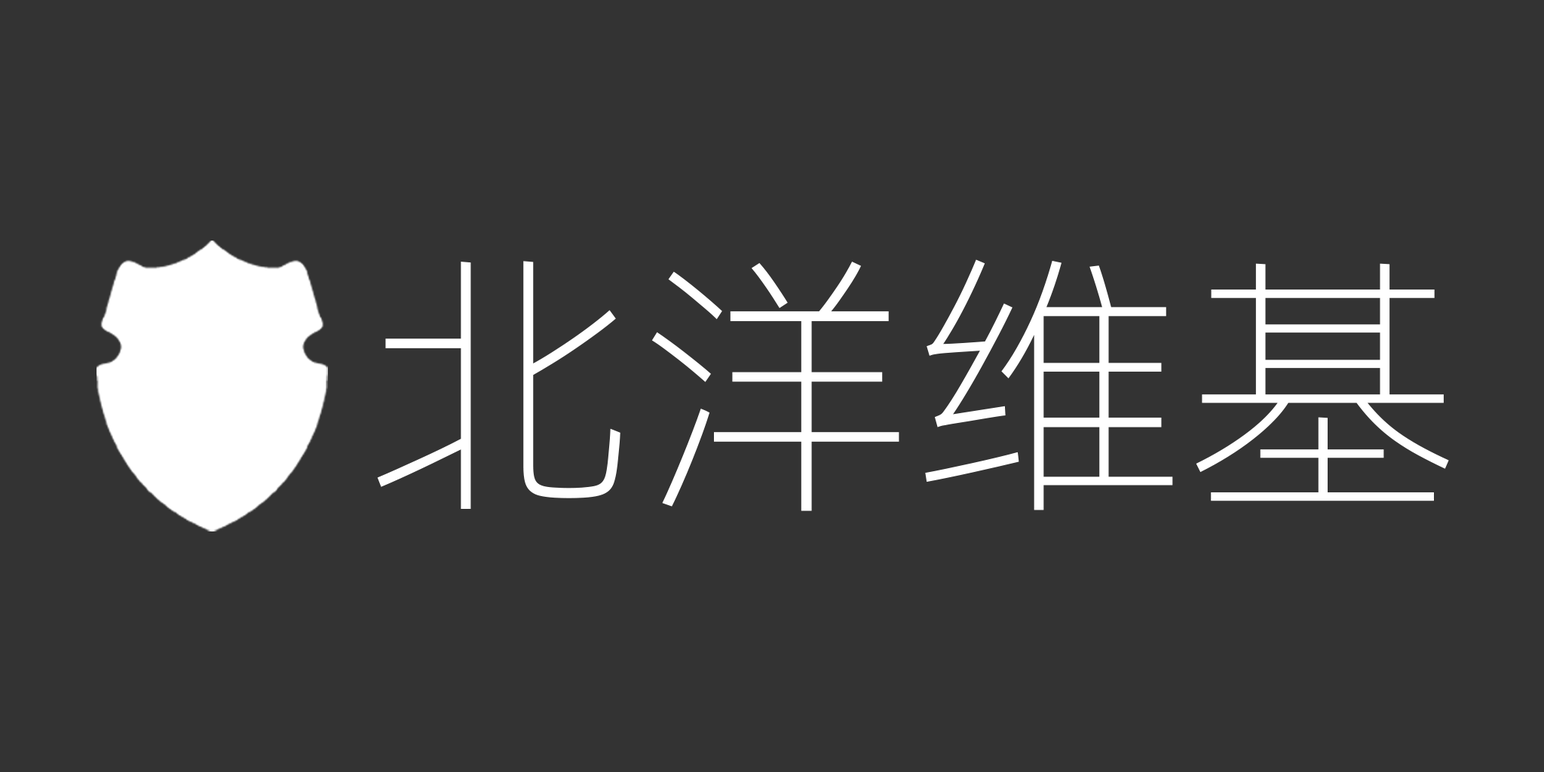
<style>
.page{position:relative;width:1544px;height:772px;background:#333333}
.page>*{position:absolute;margin:0}
.t1{font:278.6px "Alibaba-PuHuiTi-L";color:#ffffff}
</style>
<div class="page">
<p class="t1" style="left:377px;top:259px;width:1072px;height:252px">北洋维基</p>
</div>
